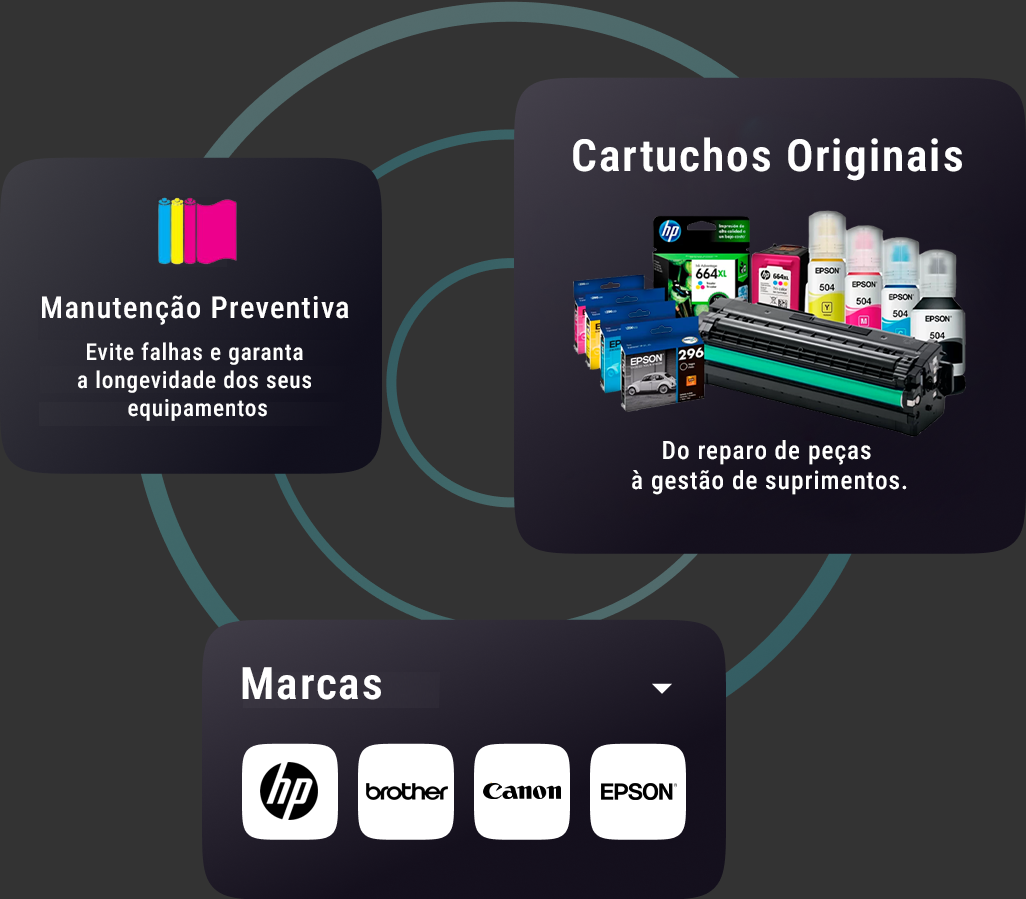
<style>
.page{position:relative;width:1026px;height:899px;background:#333333}
.page>*{position:absolute;margin:0}
.t1{font:44.4px "Roboto-CondensedSemiBold";letter-spacing:0.04em;color:#ffffff}
.t2{font:30.2px "Roboto-CondensedMedium";letter-spacing:0.04em;color:#ffffff}
.t3{font:23.3px "Roboto-CondensedMedium";letter-spacing:0.04em;color:#ffffff}
.t4{font:25.4px "Roboto-CondensedMedium";letter-spacing:0.04em;color:#ffffff}
</style>
<div class="page">
<p class="t1" style="left:573px;top:137px;width:389px;height:44px">Cartuchos Originais</p>
<p class="t2" style="left:42px;top:295px;width:307px;height:30px">Manutenção Preventiva</p>
<p class="t3" style="left:78px;top:342px;width:233px;height:79px;text-align:center">Evite falhas e garanta<br>a longevidade dos seus<br> equipamentos</p>
<p class="t4" style="left:632px;top:440px;width:275px;height:55px;text-align:center">Do reparo de peças <br>à gestão de suprimentos.</p>
<p class="t1" style="left:242px;top:667px;width:139px;height:33px">Marcas</p>
</div>
